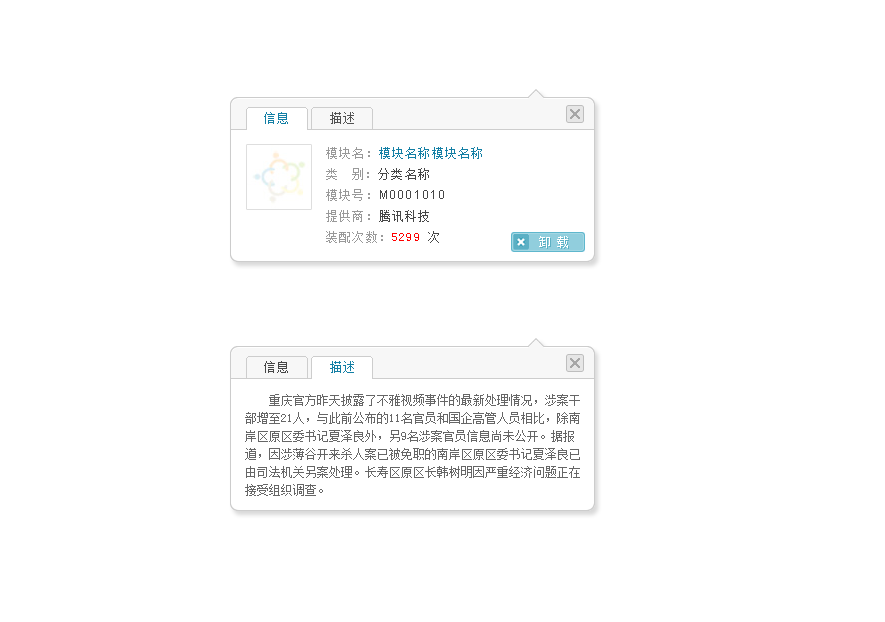
<style>
.page{position:relative;width:885px;height:622px;background:#ffffff}
.page>*{position:absolute;margin:0}
.t1{font:12px "SimSun";letter-spacing:0.1em;color:#137fa5}
.t2{font:12px "SimSun";letter-spacing:0.1em;color:#525252}
.t3{font:12px/21px "SimSun";letter-spacing:0.1em;color:#137fa5}
.t4{font:12px/21px "SimSun";letter-spacing:0.1em;color:#999999}
.t5{font:12px/21px "SimSun";letter-spacing:0.1em;color:#464646}
.t6{font:12px/21px "ArialMT";letter-spacing:0.1em;color:#464646}
.t7{font:12px/21px "SimSun";letter-spacing:0.1em;color:#ff0000}
.t8{font:12px "SimSun";letter-spacing:0.1em;color:#464646}
.t9{font:12px/18px "SimSun";color:#666666}
</style>
<div class="page">
<p class="t1" style="left:264px;top:112px;width:24px;height:12px">信息</p>
<p class="t2" style="left:330px;top:112px;width:24px;height:12px">描述</p>
<p class="t3" style="left:326px;top:147px;width:156px;height:96px"><span class="t4">模块名：</span>模块名称模块名称<br><span class="t4">类   别：</span><span class="t5">分类名称<br></span><span class="t4">模块号：</span><span class="t6">M0001010<br></span><span class="t4">提供商：</span><span class="t5">腾讯科技<br></span><span class="t4">装配次数：</span><span class="t7">5299 </span><span class="t5">次</span></p>
<p class="t8" style="left:264px;top:361px;width:24px;height:12px">信息</p>
<p class="t1" style="left:330px;top:361px;width:24px;height:12px">描述</p>
<p class="t9" style="left:245px;top:394px;width:335px;height:102px">重庆官方昨天披露了不雅视频事件的最新处理情况，涉案干部增至21人，与此前公布的11名官员和国企高管人员相比，除南岸区原区委书记夏泽良外，另9名涉案官员信息尚未公开。据报道，因涉薄谷开来杀人案已被免职的南岸区原区委书记夏泽良已由司法机关另案处理。长寿区原区长韩树明因严重经济问题正在接受组织调查。</p>
</div>
